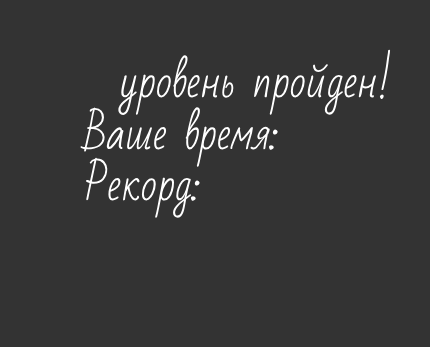
<style>
.page{position:relative;width:430px;height:347px;background:#333333}
.page>*{position:absolute;margin:0}
.t1{font:43px "BadScript-Regular";color:#ffffff}
</style>
<div class="page">
<p class="t1" style="left:80px;top:49px;width:311px;height:169px">уровень пройден!<br>Ваше время: <br>Рекорд:</p>
</div>
